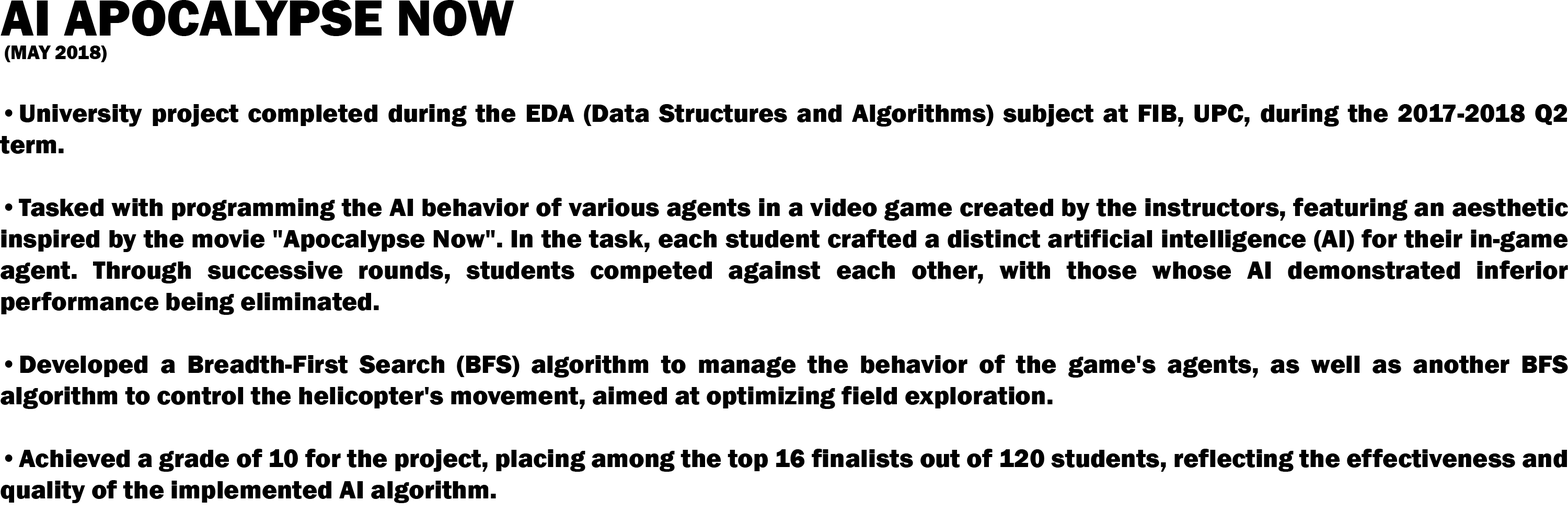
<style>
.page{position:relative;width:1568px;height:523px;background:#ffffff}
.page>*{position:absolute;margin:0}
.t1{font:26.1px "FranklinGothic-Heavy";color:#000000}
.t2{font:52.3px "FranklinGothic-Heavy";color:#000000}
.t3{font:19.6px "FranklinGothic-Heavy";color:#000000}
</style>
<div class="page">
<p class="t1" style="left:0px;top:0px;width:1568px;height:503px"><span class="t2">AI APOCALYPSE NOW <br></span><span class="t3"> (MAY 2018)<br></span><br>• University project completed during the EDA (Data Structures and Algorithms) subject at FIB, UPC, during the 2017-2018 Q2 term.<br><br>• Tasked with programming the AI behavior of various agents in a video game created by the instructors, featuring an aesthetic inspired by the movie "Apocalypse Now". In the task, each student crafted a distinct artificial intelligence (AI) for their in-game agent. Through successive rounds, students competed against each other, with those whose AI demonstrated inferior performance being eliminated.<br><br>• Developed a Breadth-First Search (BFS) algorithm to manage the behavior of the game's agents, as well as another BFS algorithm to control the helicopter's movement, aimed at optimizing field exploration. <br><br>• Achieved a grade of 10 for the project, placing among the top 16 finalists out of 120 students, reflecting the effectiveness and quality of the implemented AI algorithm.</p>
</div>
